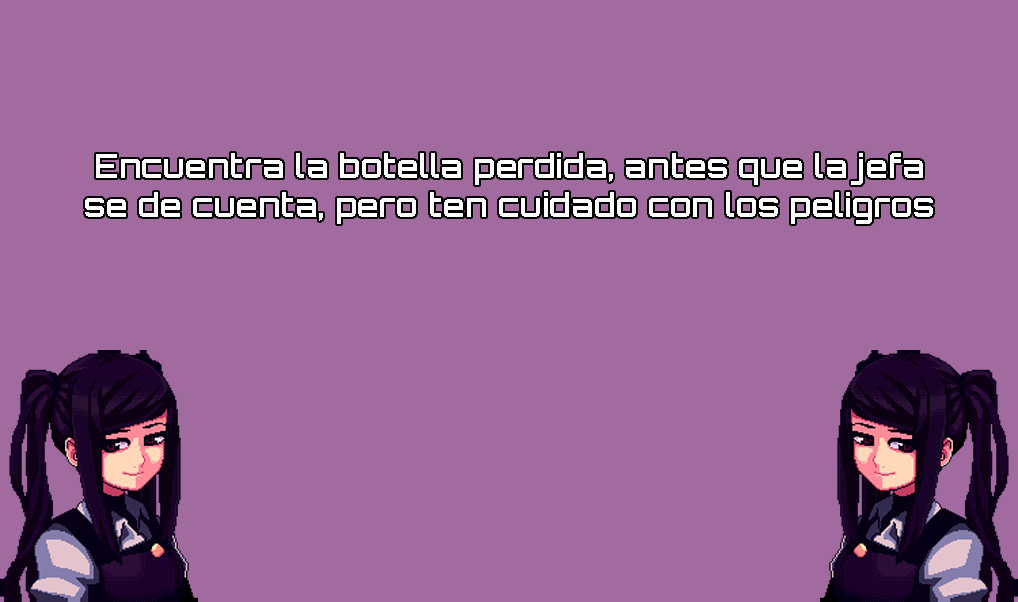
<style>
.page{position:relative;width:1018px;height:602px;background:#a26ba0}
.page>*{position:absolute;margin:0}
.t1{font:32.6px "Orbitron-Bold";color:#ffffff}
</style>
<div class="page">
<p class="t1" style="left:85px;top:153px;width:848px;height:71px;text-align:center">Encuentra la botella perdida, antes que la jefa<br>se de cuenta, pero ten cuidado con los peligros</p>
</div>
